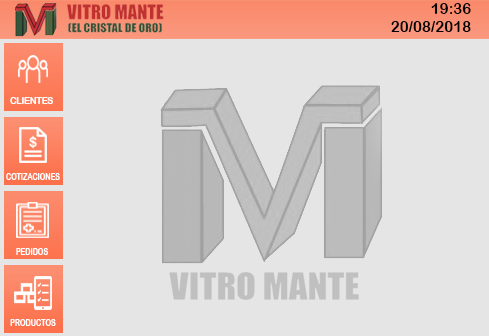
<style>
.page{position:relative;width:489px;height:336px;background:#e5e5e5}
.page>*{position:absolute;margin:0}
.t1{font:14.7px "ArialRoundedMTBold";color:#000000;scale:1.03 1}
.t2{font:9.8px "ArialRoundedMTBold";color:#ffffff;scale:0.87 1}
.t3{font:10.2px "ArialRoundedMTBold";color:#ffffff;scale:0.68 1}
</style>
<div class="page">
<p class="t1" style="left:431px;top:3px;width:40px;height:11px">19:36</p>
<p class="t1" style="left:391px;top:21px;width:80px;height:11px">20/08/2018</p>
<p class="t2" style="left:10px;top:97px;width:43px;height:7px">CLIENTES</p>
<p class="t3" style="left:6px;top:173px;width:54px;height:7px">COTIZACIONES</p>
<p class="t3" style="left:16px;top:248px;width:32px;height:7px">PEDIDOS</p>
<p class="t3" style="left:10px;top:319px;width:46px;height:7px">PRODUCTOS</p>
</div>
